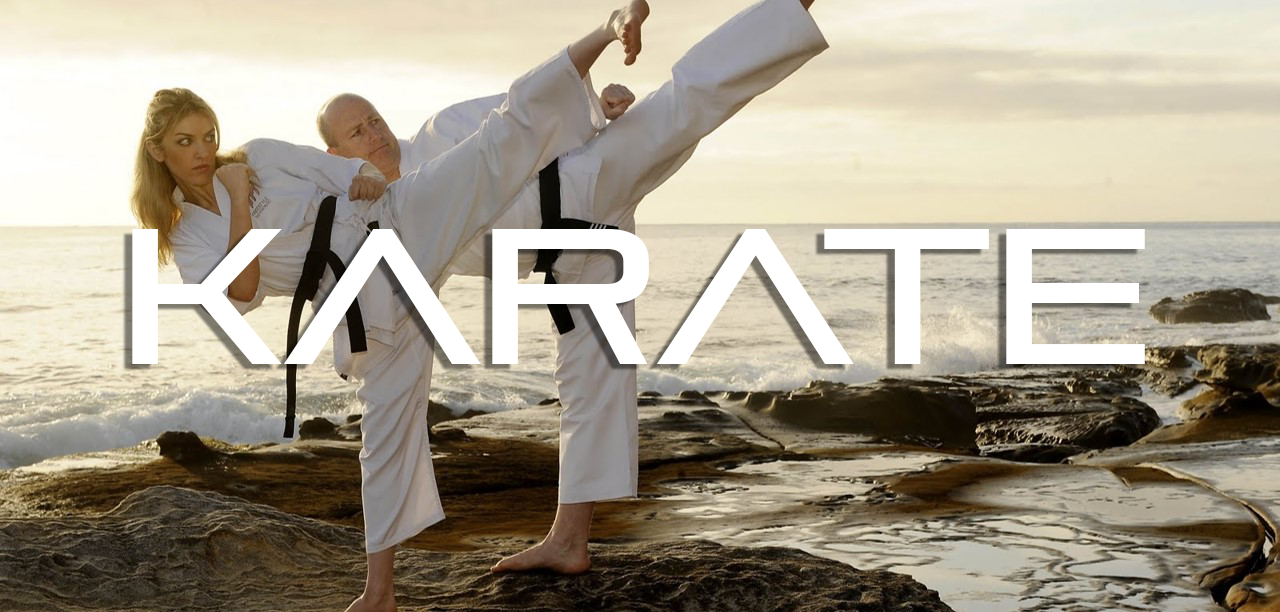
<style>
.page{position:relative;width:1280px;height:612px}
.page>*{position:absolute;margin:0}
.t1{font:190.7px "PirulenRg-Regular";color:#ffffff}
</style>
<div class="page">
<p class="t1" style="left:132px;top:229px;width:1013px;height:135px">karate</p>
</div>
